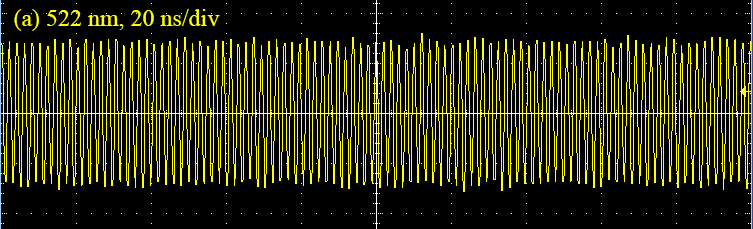
<style>
.page{position:relative;width:753px;height:229px;background:#000000}
.page>*{position:absolute;margin:0}
.t1{font:24px "TimesNewRomanPSMT";color:#ffff00}
</style>
<div class="page">
<p class="t1" style="left:14px;top:9px;width:206px;height:22px">(a) 522 nm, 20 ns/div</p>
</div>
